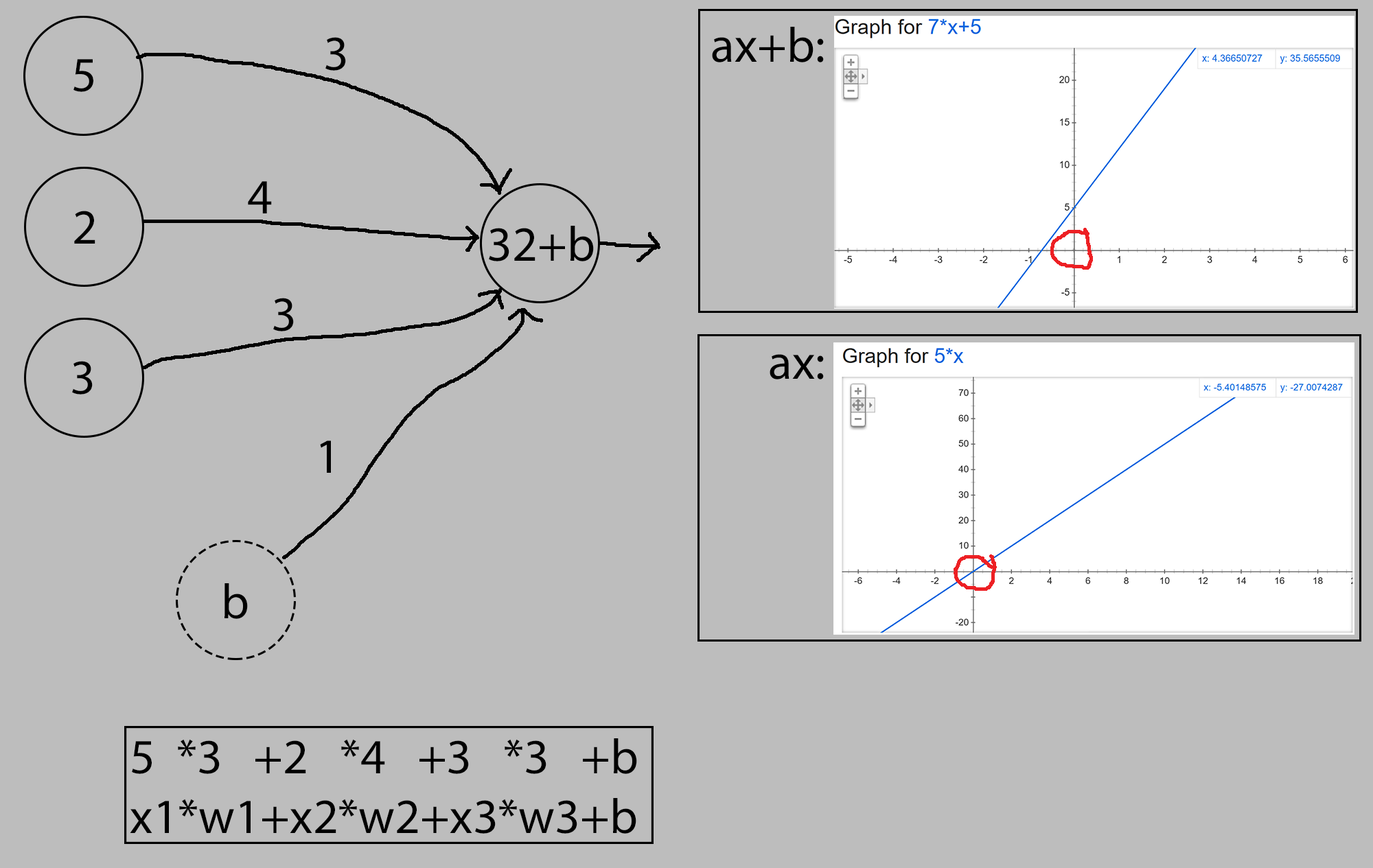
<style>
.page{position:relative;width:1373px;height:868px;background:#bdbdbd}
.page>*{position:absolute;margin:0}
.t1{font:49.4px "MyriadPro-Regular";color:#000000}
</style>
<div class="page">
<p class="t1" style="left:712px;top:27px;width:112px;height:35px">ax+b:</p>
<p class="t1" style="left:325px;top:37px;width:21px;height:34px">3</p>
<p class="t1" style="left:73px;top:59px;width:20px;height:33px">5</p>
<p class="t1" style="left:248px;top:181px;width:24px;height:33px">4</p>
<p class="t1" style="left:74px;top:211px;width:21px;height:33px">2</p>
<p class="t1" style="left:489px;top:226px;width:105px;height:36px">32+b</p>
<p class="t1" style="left:273px;top:298px;width:21px;height:34px">3</p>
<p class="t1" style="left:72px;top:361px;width:21px;height:34px">3</p>
<p class="t1" style="left:770px;top:354px;width:54px;height:26px">ax:</p>
<p class="t1" style="left:320px;top:441px;width:11px;height:32px">1</p>
<p class="t1" style="left:224px;top:584px;width:24px;height:35px">b</p>
<p class="t1" style="left:130px;top:739px;width:507px;height:95px">5  *3   +2   *4   +3   *3   +b<br>x1*w1+x2*w2+x3*w3+b</p>
</div>
